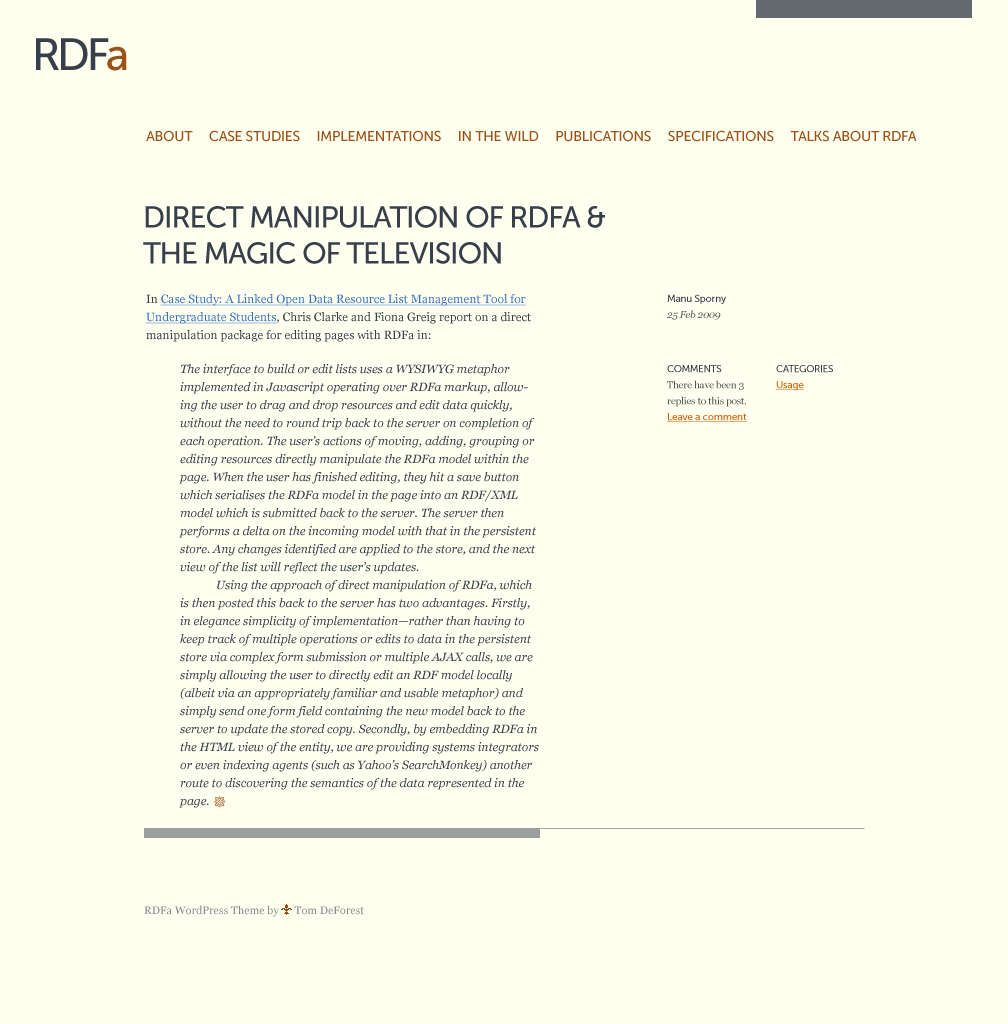
<style>
.page{position:relative;width:1008px;height:1024px;background:#fffff0}
.page>*{position:absolute;margin:0}
.t1{font:44.8px "MuseoSans-500";letter-spacing:-0.08em;color:#373f4a}
.t2{font:44.8px "MuseoSans-500";letter-spacing:-0.08em;color:#9b5218}
.t3{font:14px "MuseoSans-500";letter-spacing:-0.02em;color:#9b5218;text-transform:uppercase}
.t4{font:30px/36px "MuseoSans-500";letter-spacing:-0.04em;color:#373f4a;text-transform:uppercase}
.t5{font:12px/18px "Georgia";color:#373f4a}
.t6{font:12px/18px "Georgia";color:#3673c2;text-decoration:underline}
.t7{font:10px/16px "MuseoSans-500";letter-spacing:-0.02em;color:#373f4a}
.t8{font:10px/16px "Georgia-Italic";letter-spacing:-0.02em;color:#555753}
.t9{font:12px/18px "Georgia-Italic";color:#373f4a}
.t10{font:10px/16px "Georgia";letter-spacing:-0.02em;color:#555753}
.t11{font:10px/16px "MuseoSans-500";letter-spacing:-0.04em;color:#373f4a;text-transform:uppercase}
.t12{font:10px/16px "MuseoSans-500";letter-spacing:-0.02em;color:#ce5c00;text-decoration:underline}
.t13{font:18px "TypeEmbellishmentsOneLetPlain"}
.t14{font:11px "Georgia";color:#878c8c}
</style>
<div class="page">
<p class="t1" style="left:36px;top:38px;width:91px;height:33px">RDF<span class="t2">a</span></p>
<p class="t3" style="left:146px;top:130px;width:771px;height:12px">About     Case Studies     Implementations     in the wild     Publications     Specifications     Talks about RDFa</p>
<p class="t4" style="left:143px;top:206px;width:462px;height:58px">Direct manipulation of RDFa &amp; The Magic of Television</p>
<p class="t5" style="left:146px;top:294px;width:385px;height:48px">In <span class="t6">Case Study: A Linked Open Data Resource List Management Tool for Undergraduate Students</span>, Chris Clarke and Fiona Greig report on a direct manipulation package for editing pages with RDFa in:</p>
<p class="t7" style="left:667px;top:294px;width:59px;height:26px">Manu Sporny<br><span class="t8">25 Feb 2009</span></p>
<p class="t9" style="left:179px;top:364px;width:360px;height:444px">The interface to build or edit lists uses a WYSIWYG metaphor implemented in Javascript operating over RDFa markup, allowing the user to drag and drop resources and edit data quickly, without the need to round trip back to the server on completion of each operation. The user’s actions of moving, adding, grouping or editing resources directly manipulate the RDFa model within the page. When the user has finished editing, they hit a save button which serialises the RDFa model in the page into an RDF/XML model which is submitted back to the server. The server then performs a delta on the incoming model with that in the persistent store. Any changes identified are applied to the store, and the next view of the list will reflect the user’s updates.<br> Using the approach of direct manipulation of RDFa, which is then posted this back to the server has two advantages. Firstly, in elegance simplicity of implementation—rather than having to keep track of multiple operations or edits to data in the persistent store via complex form submission or multiple AJAX calls, we are simply allowing the user to directly edit an RDF model locally (albeit via an appropriately familiar and usable metaphor) and simply send one form field containing the new model back to the server to update the stored copy. Secondly, by embedding RDFa in the HTML view of the entity, we are providing systems integrators or even indexing agents (such as Yahoo’s SearchMonkey) another route to discovering the semantics of the data represented in the page.</p>
<p class="t10" style="left:667px;top:365px;width:80px;height:57px"><span class="t11">Comments<br></span>There have been 3 replies to this post.<br><span class="t12">Leave a comment</span></p>
<p class="t11" style="left:776px;top:365px;width:57px;height:26px">Categories<br><span class="t12">Usage</span></p>
<p class="t13" style="left:213px;top:795px;width:13px;height:13px">#</p>
<p class="t14" style="left:144px;top:905px;width:220px;height:12px">RDFa WordPress Theme by      Tom DeForest</p>
</div>
